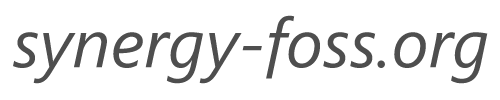
<style>
.page{position:relative;width:500px;height:100px;background:#ffffff}
.page>*{position:absolute;margin:0}
.t1{font:68.6px "SegoeUI-Italic";color:#4e4e4e}
</style>
<div class="page">
<p class="t1" style="left:13px;top:15px;width:475px;height:69px">synergy-foss.org</p>
</div>
